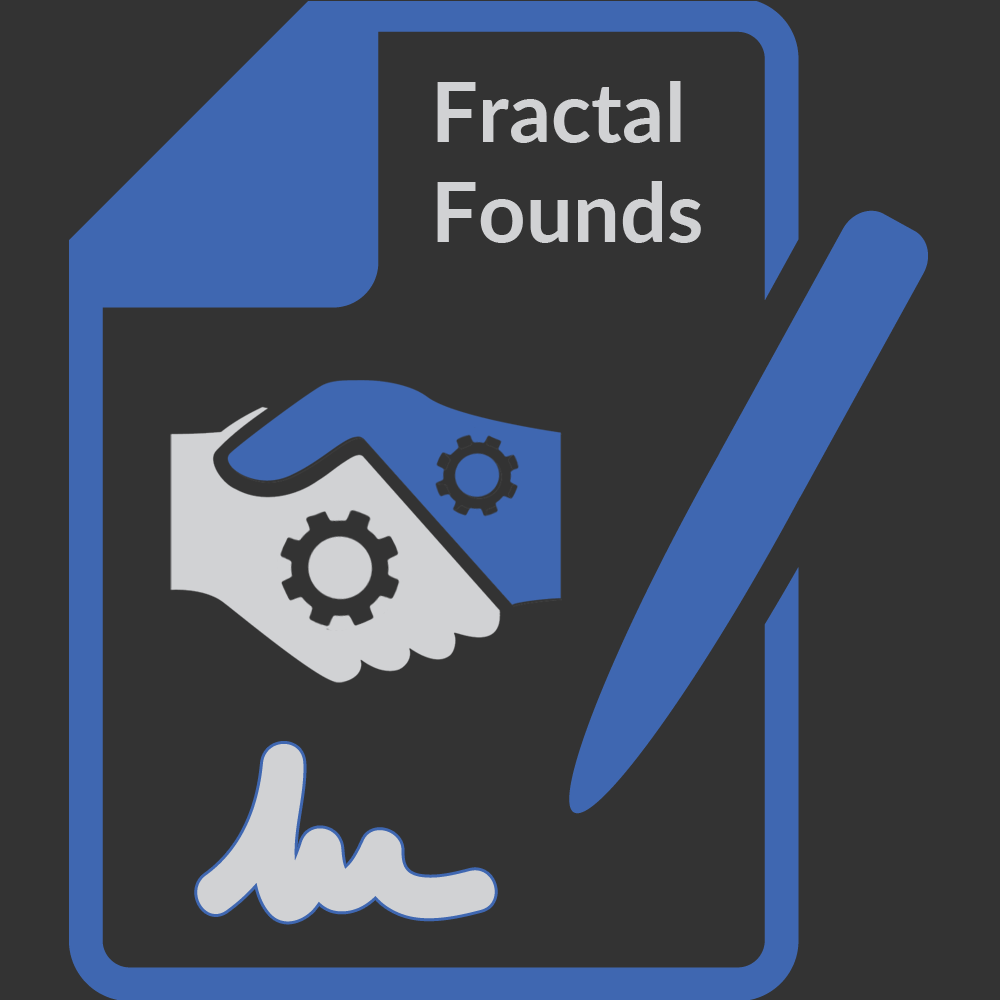
<style>
.page{position:relative;width:1000px;height:1000px;background:#333333}
.page>*{position:absolute;margin:0}
.t1{font:83.3px "Lato-Bold";color:#d1d2d4}
</style>
<div class="page">
<p class="t1" style="left:437px;top:81px;width:264px;height:162px">Fractal<br>Founds</p>
</div>
